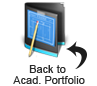
<style>
.page{position:relative;width:97px;height:86px;background:#ffffff}
.page>*{position:absolute;margin:0}
.t1{font:11px/10.8px "ArialMT";color:#2b2b2b}
</style>
<div class="page">
<p class="t1" style="left:13px;top:65px;width:72px;height:19px;text-align:center">Back to <br>Acad. Portfolio</p>
</div>
